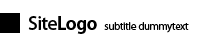
<style>
.page{position:relative;width:200px;height:50px;background:#ffffff}
.page>*{position:absolute;margin:0}
.t1{font:10px "KozGoPr6N-Regular";letter-spacing:-0.025em;color:#000000}
.t2{font:18px "KozGoPr6N-Medium";letter-spacing:-0.025em;color:#000000}
.t3{font:18px "KozGoPr6N-Bold";letter-spacing:-0.025em;color:#000000}
</style>
<div class="page">
<p class="t1" style="left:28px;top:16px;width:161px;height:18px"><span class="t2">Site</span><span class="t3">Logo  </span>subtitle dummytext</p>
</div>
